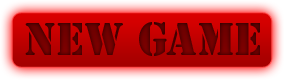
<style>
.page{position:relative;width:284px;height:80px}
.page>*{position:absolute;margin:0}
.t1{font:42.6px "StencilStd";color:#630000}
</style>
<div class="page">
<p class="t1" style="left:25px;top:22px;width:235px;height:34px">New game</p>
</div>
